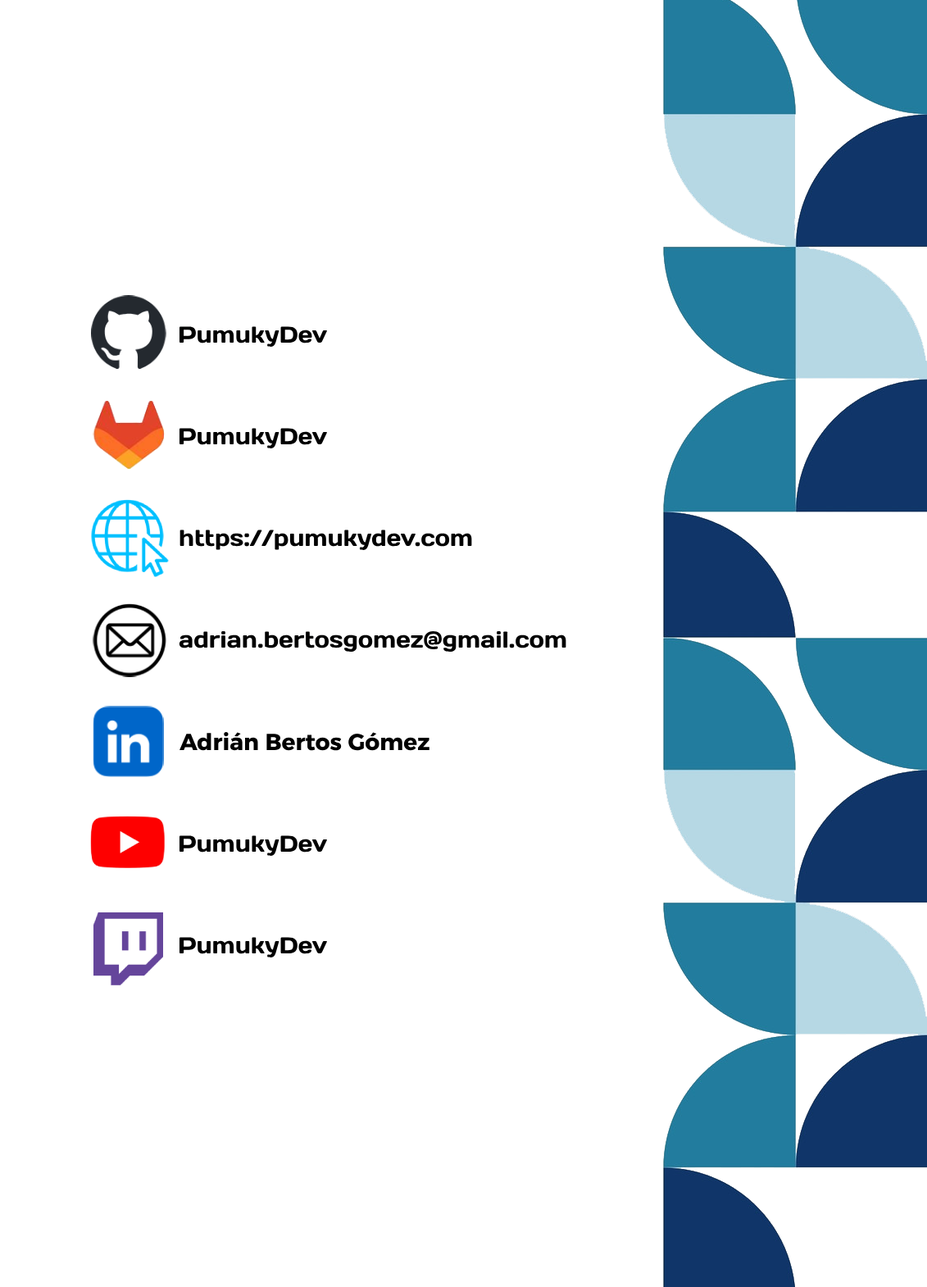
<style>
.page{position:relative;width:927px;height:1287px;background:#ffffff}
.page>*{position:absolute;margin:0}
.t1{font:22.9px "Days";color:#000000}
.t2{font:22.9px "Alexandria-Bold";color:#000000}
</style>
<div class="page">
<p class="t1" style="left:179px;top:428px;width:148px;height:20px">PumukyDev</p>
<p class="t1" style="left:179px;top:529px;width:293px;height:21px">https://pumukydev.com</p>
<p class="t1" style="left:179px;top:631px;width:387px;height:20px">adrian.bertosgomez@gmail.com</p>
<p class="t2" style="left:179px;top:731px;width:250px;height:20px">Adrián Bertos Gómez</p>
<p class="t1" style="left:179px;top:835px;width:148px;height:21px">PumukyDev</p>
<p class="t1" style="left:179px;top:937px;width:148px;height:20px">PumukyDev</p>
</div>
